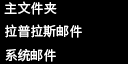
<style>
.page{position:relative;width:128px;height:64px;background:#000000}
.page>*{position:absolute;margin:0}
.t1{font:13px/23.5px "SourceHanSansSC-Regular";color:#ffffff}
</style>
<div class="page">
<p class="t1" style="left:4px;top:1px;width:78px;height:61px">主文件夹<br>拉普拉斯邮件<br>系统邮件</p>
</div>
